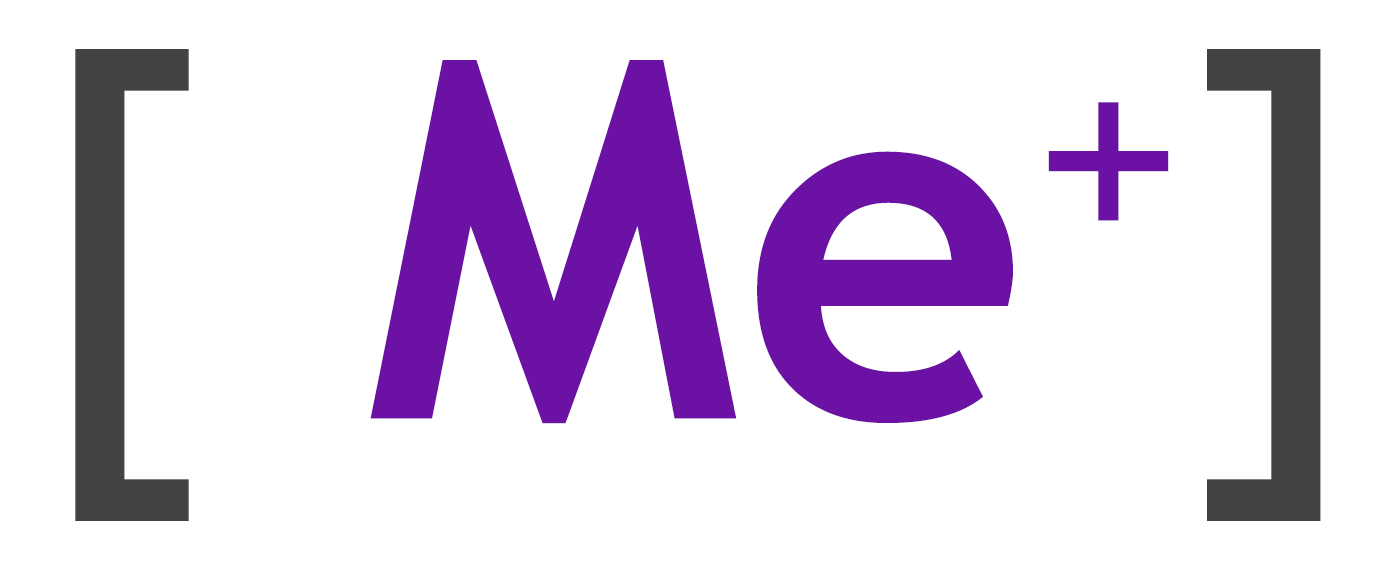
<style>
.page{position:relative;width:1390px;height:570px;background:#ffffff}
.page>*{position:absolute;margin:0}
.t1{font:500.6px "TrebuchetMS-Bold";letter-spacing:0.005em;color:#6b11a4}
.t2{font:500.6px "TrebuchetMS";letter-spacing:0.005em;color:#434343}
.t3{font:500.6px "TrebuchetMS";letter-spacing:0.005em;color:#6b11a4}
</style>
<div class="page">
<p class="t1" style="left:75px;top:49px;width:1246px;height:472px"><span class="t2">[ </span>Me<span class="t3">+</span><span class="t2">]</span></p>
</div>
